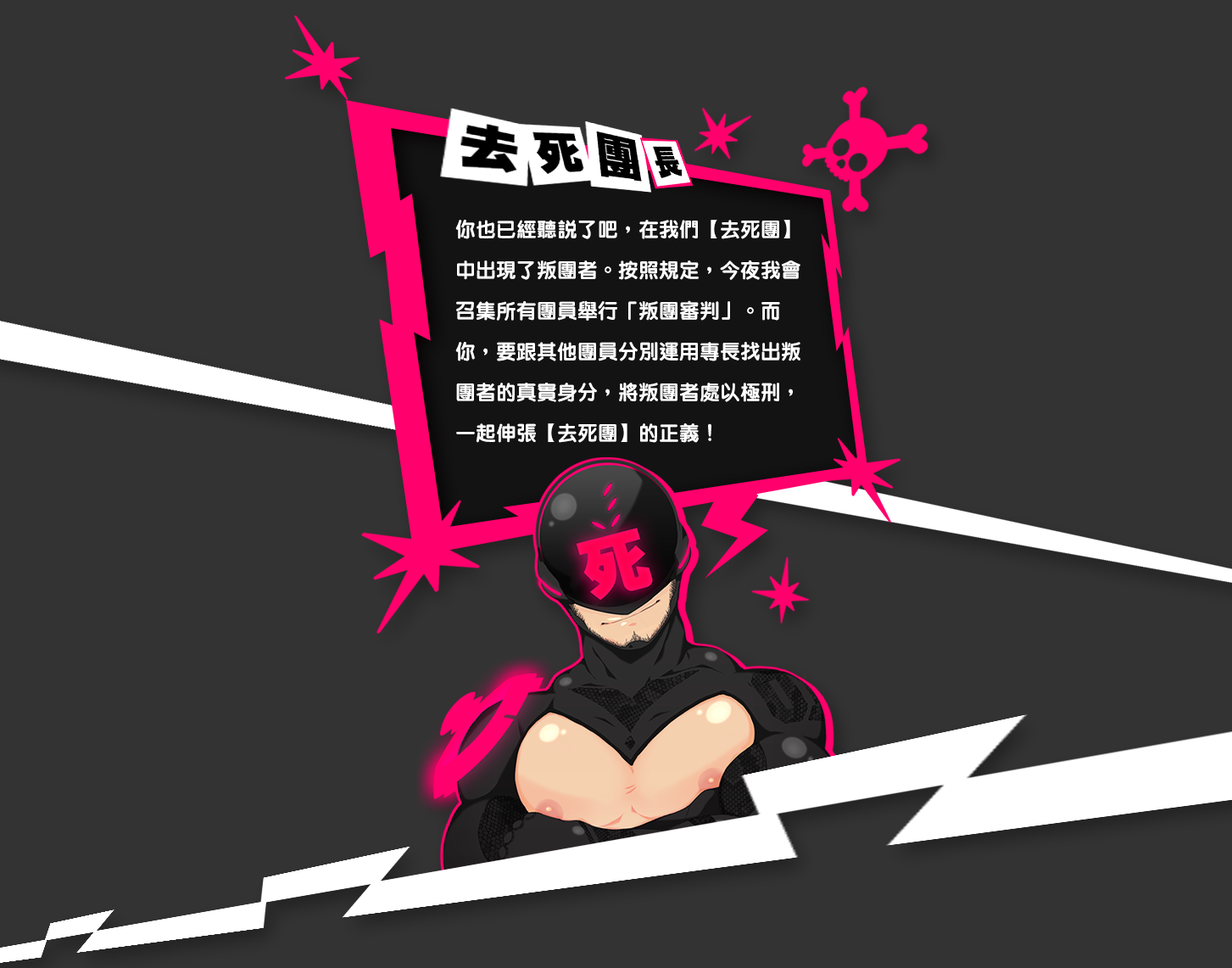
<style>
.page{position:relative;width:1232px;height:968px;background:#333333}
.page>*{position:absolute;margin:0}
.t1{font:20.4px/40.7px "MYuenHK-Xbold";color:#ffffff}
</style>
<div class="page">
<p class="t1" style="left:455px;top:220px;width:346px;height:223px">你也已經聽說了吧，在我們【去死團】中出現了叛團者。按照規定，今夜我會召集所有團員舉行「叛團審判」。而你，要跟其他團員分別運用專長找出叛團者的真實身分，將叛團者處以極刑，一起伸張【去死團】的正義！</p>
</div>
